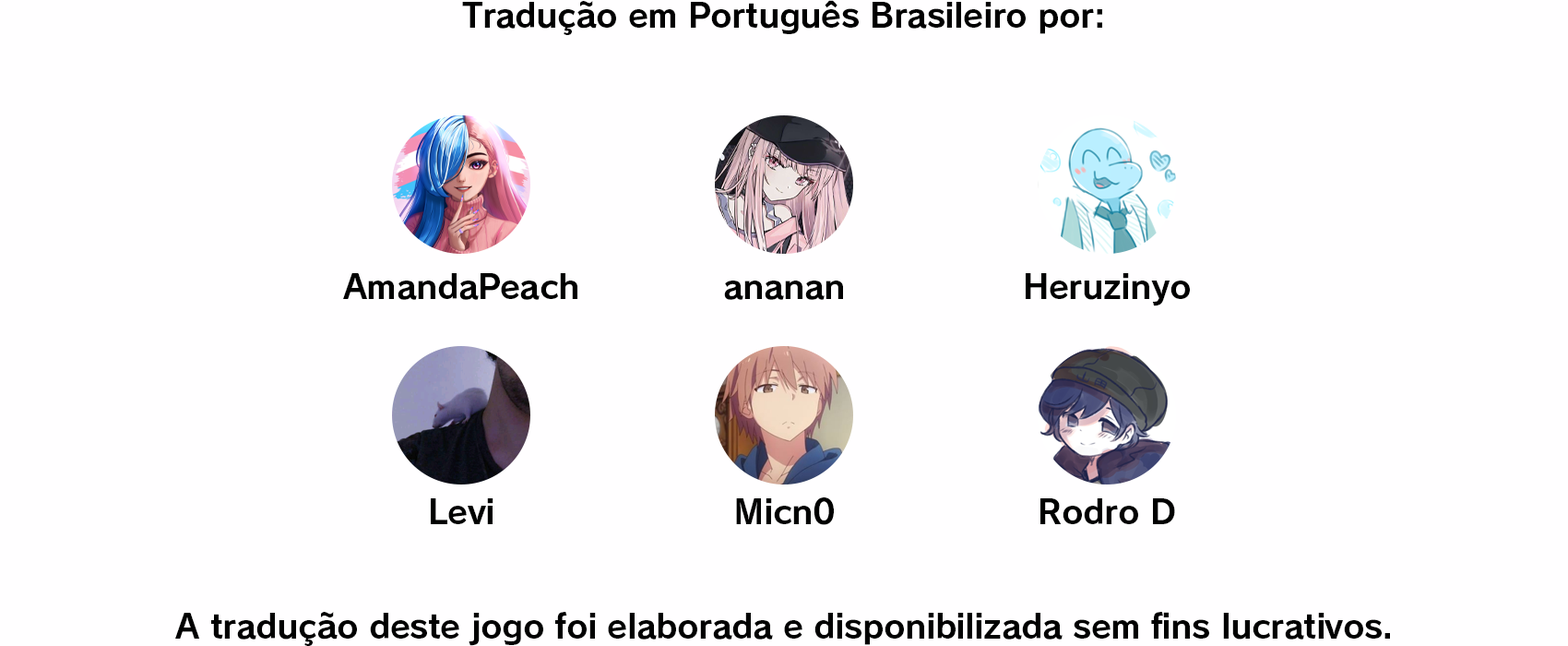
<style>
.page{position:relative;width:1568px;height:646px;background:#fffeff}
.page>*{position:absolute;margin:0}
.t1{font:33.2px "RodinPro-B";letter-spacing:-0.014em;color:#000000}
</style>
<div class="page">
<p class="t1" style="left:462px;top:0px;width:640px;height:35px">Tradução em Português Brasileiro por:</p>
<p class="t1" style="left:343px;top:273px;width:234px;height:27px">AmandaPeach</p>
<p class="t1" style="left:724px;top:280px;width:119px;height:20px">ananan</p>
<p class="t1" style="left:1026px;top:273px;width:164px;height:33px">Heruzinyo</p>
<p class="t1" style="left:736px;top:497px;width:98px;height:28px">Micn0</p>
<p class="t1" style="left:431px;top:498px;width:62px;height:26px">Levi</p>
<p class="t1" style="left:1040px;top:498px;width:135px;height:26px">Rodro D</p>
<p class="t1" style="left:175px;top:612px;width:1215px;height:34px">A tradução deste jogo foi elaborada e disponibilizada sem fins lucrativos.</p>
</div>
